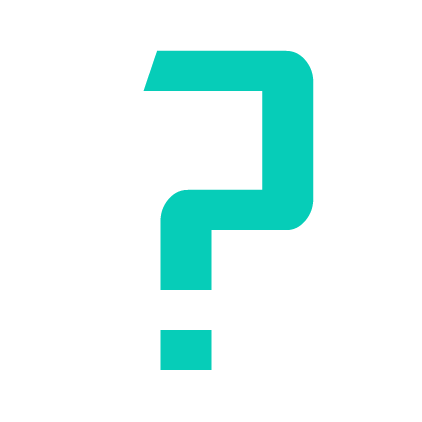
<style>
.page{position:relative;width:422px;height:422px;background:#ffffff}
.page>*{position:absolute;margin:0}
.t1{font:478.9px "SFElectrotome";color:#06cdb8;scale:0.85 1}
</style>
<div class="page">
<p class="t1" style="left:143px;top:50px;width:171px;height:320px">?</p>
</div>
